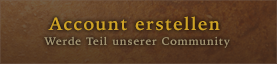
<style>
.page{position:relative;width:277px;height:64px}
.page>*{position:absolute;margin:0}
.t1{font:18px "IowanOldStyle-Bold";letter-spacing:0.07em;color:#cfa326}
.t2{font:11px "IowanOldStyle-Bold";letter-spacing:0.07em;color:#a29371}
</style>
<div class="page">
<p class="t1" style="left:48px;top:16px;width:172px;height:15px">Account erstellen</p>
<p class="t2" style="left:44px;top:36px;width:186px;height:12px">Werde Teil unserer Community</p>
</div>
